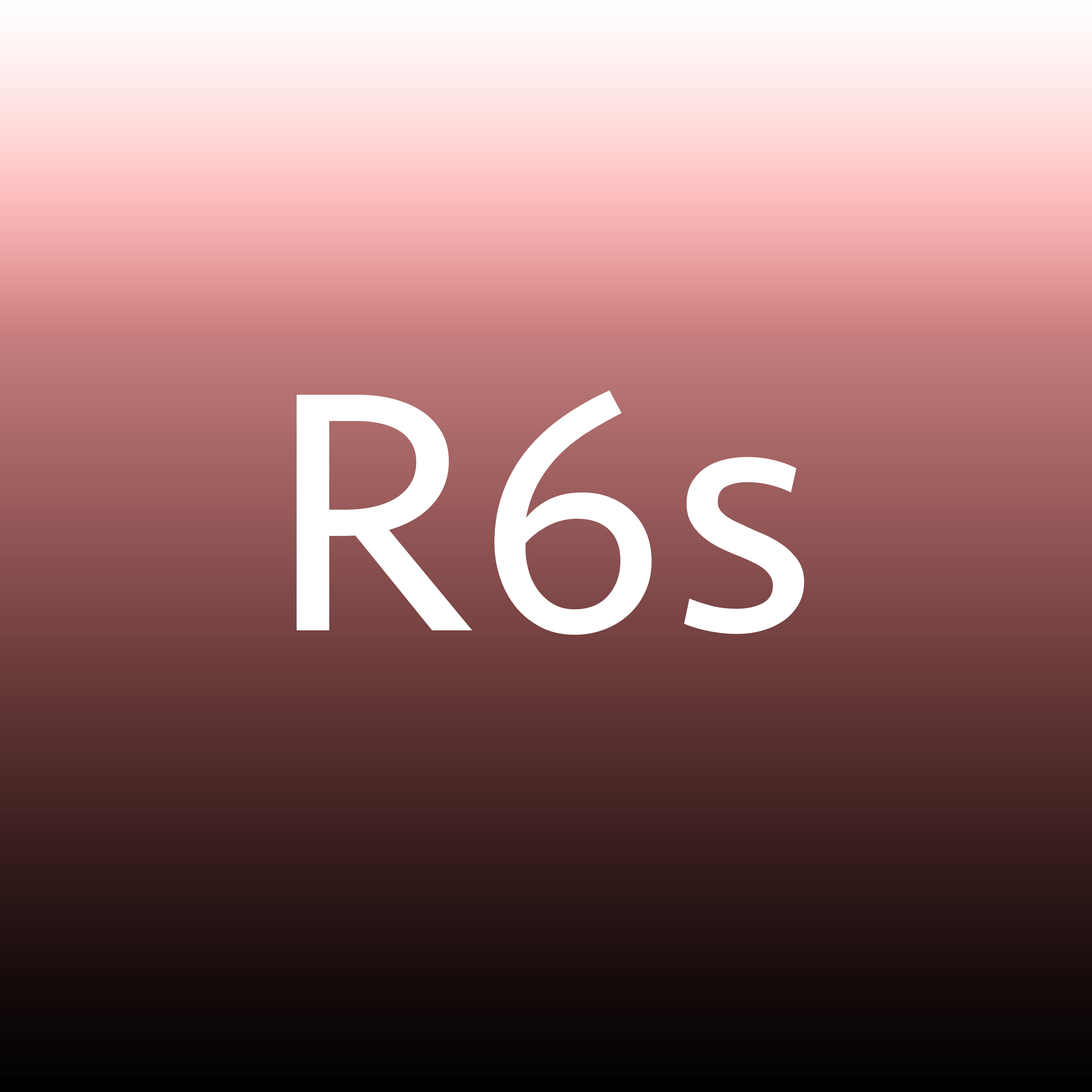
<style>
.page{position:relative;width:1092px;height:1092px}
.page>*{position:absolute;margin:0}
.t1{font:353.8px "Seravek";color:#ffffff}
</style>
<div class="page">
<p class="t1" style="left:296px;top:390px;width:508px;height:245px">R6s</p>
</div>
